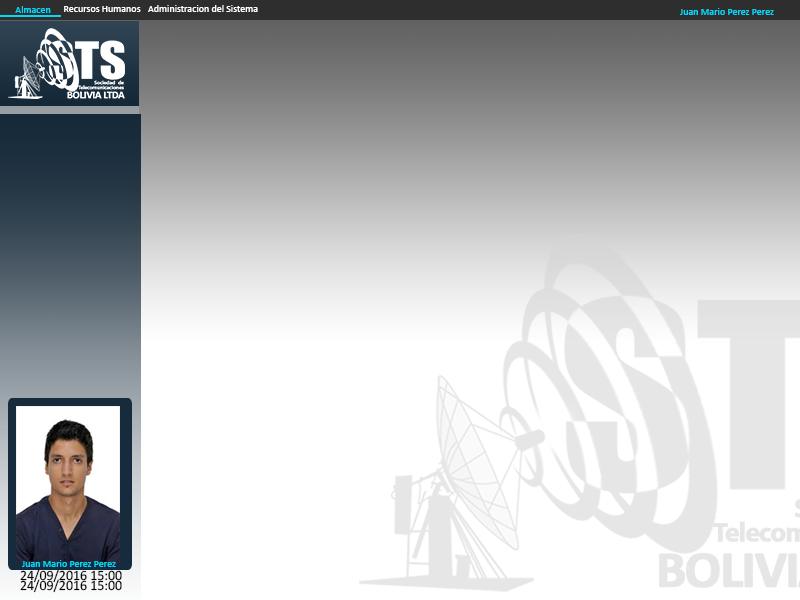
<style>
.page{position:relative;width:800px;height:600px;background:#ffffff}
.page>*{position:absolute;margin:0}
.t1{font:10px "Calibri";color:#00dafa}
.t2{font:10px "Calibri";color:#ffffff}
.t3{font:14.2px "Calibri";color:#000000}
</style>
<div class="page">
<p class="t1" style="left:15px;top:6px;width:36px;height:7px">Almacen</p>
<p class="t2" style="left:64px;top:6px;width:77px;height:6px">Recursos Humanos</p>
<p class="t2" style="left:148px;top:5px;width:110px;height:7px">Administracion del Sistema</p>
<p class="t1" style="left:679px;top:8px;width:95px;height:7px">Juan Mario Perez Perez</p>
<p class="t3" style="left:20px;top:569px;width:102px;height:14px">24/09/2016 15:00</p>
<p class="t1" style="left:21px;top:560px;width:95px;height:7px">Juan Mario Perez Perez</p>
<p class="t3" style="left:20px;top:579px;width:102px;height:14px">24/09/2016 15:00</p>
</div>
